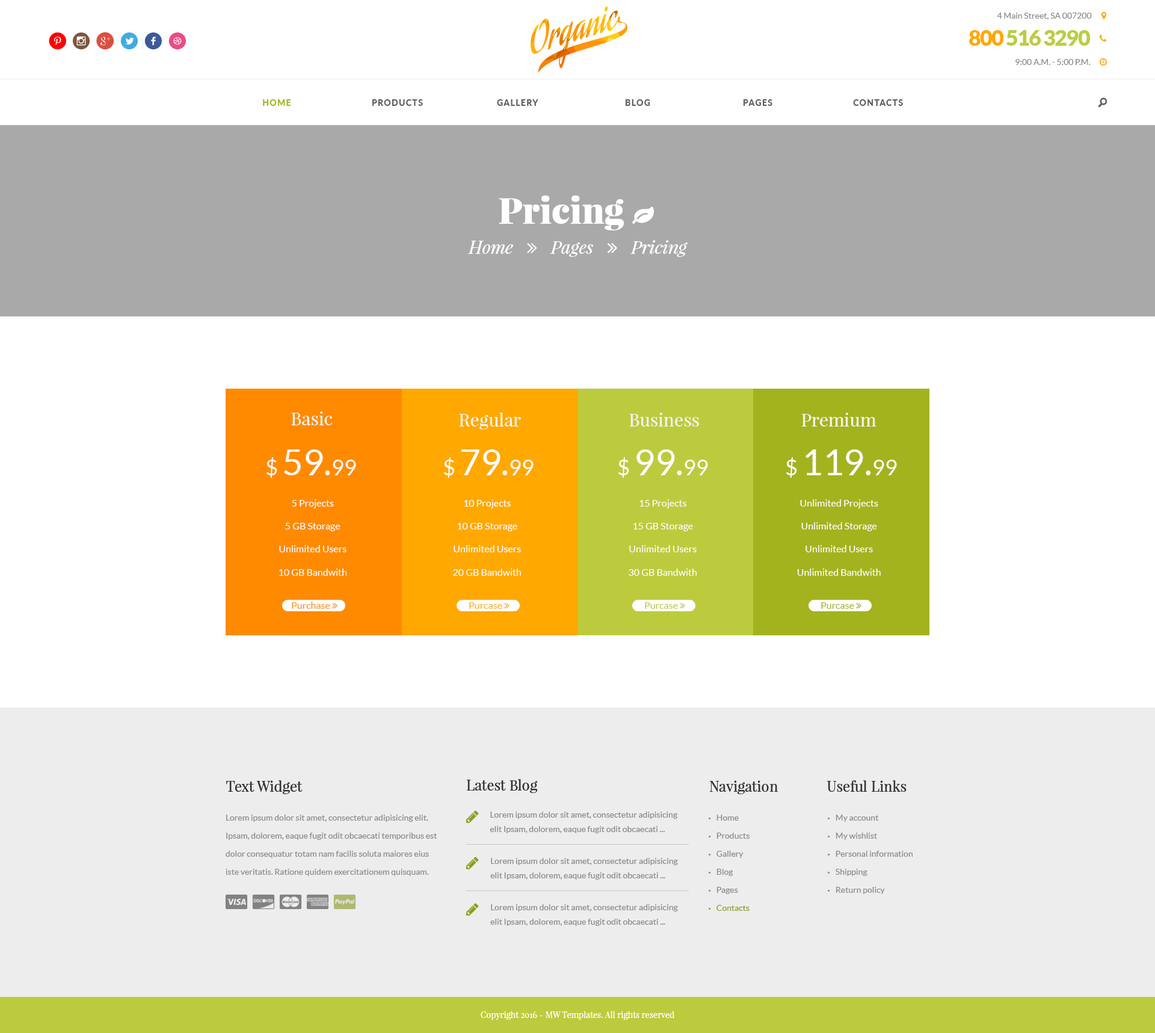
<style>
.page{position:relative;width:1155px;height:1033px;background:#ffffff}
.page>*{position:absolute;margin:0}
.t1{font:8.4px "Lato-Regular";color:#898989}
.t2{font:24.1px "SocialicoPlus";letter-spacing:0.2em;color:#ff0000}
.t3{font:24.1px "SocialicoPlus";letter-spacing:0.2em;color:#7c5641}
.t4{font:24.1px "SocialicoPlus";letter-spacing:0.2em;color:#dd4e41}
.t5{font:24.1px "Socialico";letter-spacing:0.2em;color:#41abe1}
.t6{font:24.1px "Socialico";letter-spacing:0.2em;color:#3d5a98}
.t7{font:24.1px "Socialico";letter-spacing:0.2em;color:#ea4c89}
.t8{font:21.7px "Lato-Black";letter-spacing:-0.05em;color:#bdcc41}
.t9{font:21.7px "Lato-Black";letter-spacing:-0.05em;color:#ffa800}
.t10{font:8.4px "Lato-Heavy";letter-spacing:0.1em;color:#a6b525;text-transform:uppercase}
.t11{font:8.4px "Lato-Heavy";letter-spacing:0.1em;color:#606060;text-transform:uppercase}
.t12{font:18px "SocialicoPlus";color:#606060;text-transform:uppercase}
.t13{font:18px "PlayfairDisplay-Regular";color:#f2f2f2}
.t14{font:36.1px "Lato-Regular";color:#ffffff}
.t15{font:21.7px "Lato-Regular";color:#ffffff}
.t16{font:9.6px/18px "Lato-Regular";color:#ffffff}
.t17{font:14.4px "PlayfairDisplay-Regular";color:#333333}
.t18{font:8.4px/18px "Lato-Regular";color:#898989}
.t19{font:8.4px/14.4px "Lato-Regular";color:#898989}
.t20{font:8.4px/18px "MyriadPro-Regular";color:#898989;text-transform:uppercase}
.t21{font:8.4px/18px "MyriadPro-Regular";color:#909e1a;text-transform:uppercase}
.t22{font:8.4px/18px "Lato-Regular";color:#909e1a}
.t23{font:8.4px "PlayfairDisplay-Regular";color:#ffffff}
</style>
<div class="page">
<p class="t1" style="left:997px;top:13px;width:95px;height:7px">4 Main Street, SA 007200</p>
<p class="t2" style="left:49px;top:32px;width:137px;height:17px">p<span class="t3">i</span><span class="t4">h</span><span class="t5">l</span><span class="t6">f</span><span class="t7">d</span></p>
<p class="t8" style="left:969px;top:30px;width:121px;height:16px"><span class="t9">800</span> 516 3290</p>
<p class="t1" style="left:1015px;top:59px;width:75px;height:6px">9:00 A.M. - 5:00 P.M.</p>
<p class="t10" style="left:263px;top:99px;width:28px;height:7px">Home</p>
<p class="t11" style="left:372px;top:99px;width:51px;height:7px">Products</p>
<p class="t11" style="left:497px;top:99px;width:41px;height:7px">Gallery</p>
<p class="t11" style="left:625px;top:99px;width:25px;height:7px">Blog</p>
<p class="t11" style="left:743px;top:99px;width:29px;height:7px">Pages</p>
<p class="t11" style="left:853px;top:99px;width:50px;height:7px">Contacts</p>
<p class="t12" style="left:1098px;top:97px;width:9px;height:10px">o</p>
<p class="t13" style="left:291px;top:411px;width:42px;height:14px">Basic</p>
<p class="t13" style="left:459px;top:412px;width:62px;height:17px">Regular</p>
<p class="t13" style="left:629px;top:413px;width:70px;height:13px">Business</p>
<p class="t13" style="left:801px;top:413px;width:75px;height:13px">Premium</p>
<p class="t14" style="left:266px;top:449px;width:90px;height:29px"><span class="t15">$ </span>59.<span class="t15">99</span></p>
<p class="t14" style="left:443px;top:449px;width:90px;height:29px"><span class="t15">$ </span>79.<span class="t15">99</span></p>
<p class="t14" style="left:618px;top:449px;width:90px;height:29px"><span class="t15">$ </span>99.<span class="t15">99</span></p>
<p class="t14" style="left:785px;top:449px;width:112px;height:29px"><span class="t15">$ </span>119.<span class="t15">99</span></p>
<p class="t16" style="left:279px;top:499px;width:67px;height:77px;text-align:center">5 Projects<br>5 GB Storage<br>Unlimited Users<br>10 GB Bandwith</p>
<p class="t16" style="left:453px;top:499px;width:68px;height:77px;text-align:center">10 Projects<br>10 GB Storage<br>Unlimited Users<br>20 GB Bandwith</p>
<p class="t16" style="left:628px;top:499px;width:68px;height:77px;text-align:center">15 Projects<br>15 GB Storage<br>Unlimited Users<br>30 GB Bandwith</p>
<p class="t16" style="left:797px;top:499px;width:83px;height:77px;text-align:center">Unlimited Projects<br>Unlimited Storage<br>Unlimited Users<br>Unlimited Bandwith</p>
<p class="t17" style="left:226px;top:780px;width:77px;height:14px">Text Widget</p>
<p class="t17" style="left:467px;top:779px;width:71px;height:14px">Latest Blog</p>
<p class="t17" style="left:710px;top:780px;width:68px;height:14px">Navigation</p>
<p class="t17" style="left:827px;top:780px;width:79px;height:11px">Useful Links</p>
<p class="t18" style="left:226px;top:814px;width:211px;height:62px">Lorem ipsum dolor sit amet, consectetur adipisicing elit. Ipsam, dolorem, eaque fugit odit obcaecati temporibus est dolor consequatur totam nam facilis soluta maiores eius iste veritatis. Ratione quidem exercitationem quisquam.</p>
<p class="t19" style="left:490px;top:811px;width:188px;height:22px">Lorem ipsum dolor sit amet, consectetur adipisicing elit Ipsam, dolorem, eaque fugit odit obcaecati ...</p>
<p class="t18" style="left:708px;top:814px;width:41px;height:97px"><span class="t20">•   </span>Home<br><span class="t20">•   </span>Products<br><span class="t20">•   </span>Gallery<br><span class="t20">•   </span>Blog<br><span class="t20">•   </span>Pages<br><span class="t21">•   </span><span class="t22">Contacts</span></p>
<p class="t18" style="left:828px;top:814px;width:84px;height:80px"><span class="t20">•   </span>My account<br><span class="t20">•   </span>My wishlist<br><span class="t20">•   </span>Personal information<br><span class="t20">•   </span>Shipping<br><span class="t20">•   </span>Return policy</p>
<p class="t19" style="left:490px;top:858px;width:188px;height:21px">Lorem ipsum dolor sit amet, consectetur adipisicing elit Ipsam, dolorem, eaque fugit odit obcaecati ...</p>
<p class="t19" style="left:490px;top:904px;width:188px;height:22px">Lorem ipsum dolor sit amet, consectetur adipisicing elit Ipsam, dolorem, eaque fugit odit obcaecati ...</p>
<p class="t23" style="left:481px;top:1010px;width:193px;height:9px">Copyright 2016 - MW Templates. All rights reserved</p>
</div>
